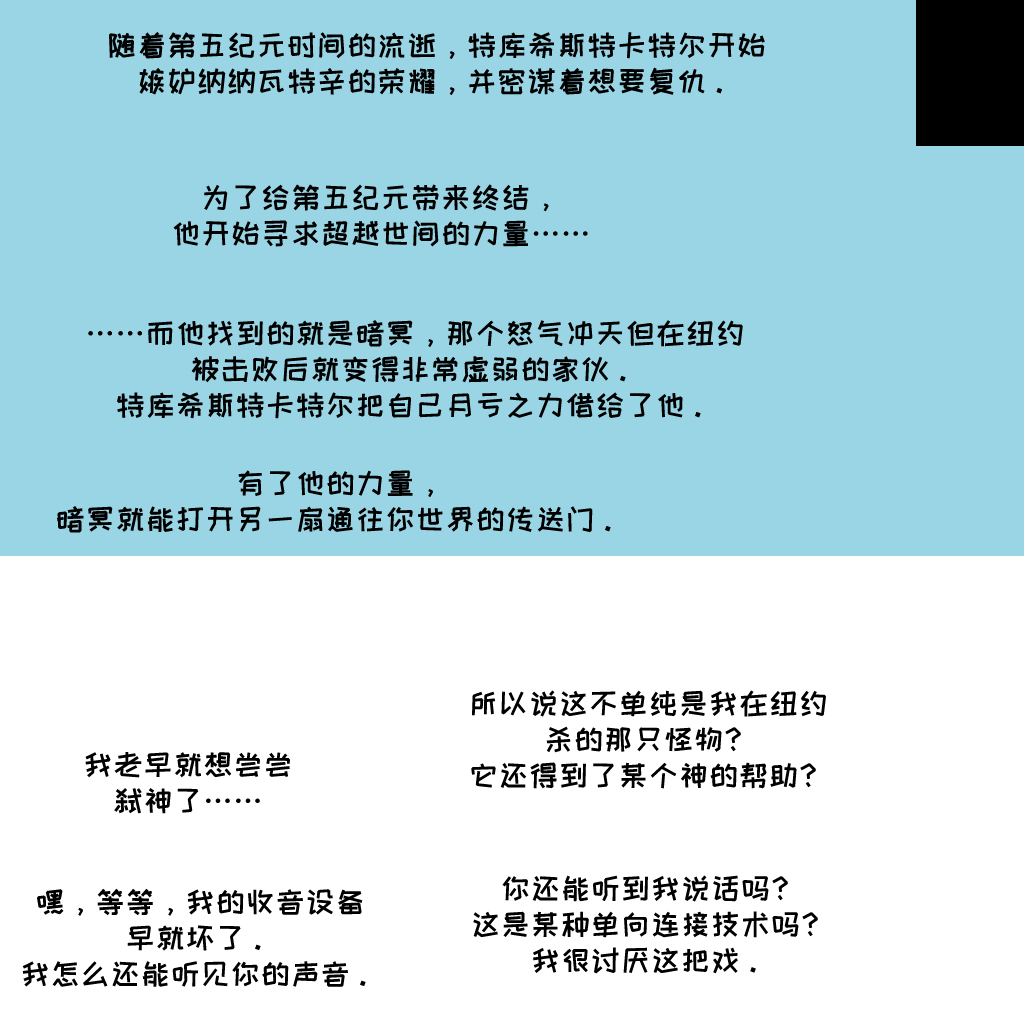
<style>
.page{position:relative;width:1024px;height:1024px;background:#99d5e4}
.page>*{position:absolute;margin:0}
.t1{font:30px/36px "HappyZcool-2016";color:#000000}
</style>
<div class="page">
<p class="t1" style="left:109px;top:32px;width:656px;height:63px;text-align:center">随着第五纪元时间的流逝，特库希斯特卡特尔开始<br>嫉妒纳纳瓦特辛的荣耀，并密谋着想要复仇。</p>
<p class="t1" style="left:173px;top:184px;width:415px;height:63px;text-align:center">为了给第五纪元带来终结，<br>他开始寻求超越世间的力量……</p>
<p class="t1" style="left:88px;top:320px;width:655px;height:99px;text-align:center">……而他找到的就是暗冥，那个怒气冲天但在纽约<br>被击败后就变得非常虚弱的家伙。<br>特库希斯特卡特尔把自己月亏之力借给了他。</p>
<p class="t1" style="left:57px;top:470px;width:554px;height:63px;text-align:center">有了他的力量，<br>暗冥就能打开另一扇通往你世界的传送门。</p>
<p class="t1" style="left:471px;top:690px;width:355px;height:99px;text-align:center">所以说这不单纯是我在纽约<br>杀的那只怪物？<br>它还得到了某个神的帮助？</p>
<p class="t1" style="left:85px;top:752px;width:205px;height:62px;text-align:center">我老早就想尝尝<br>弑神了……</p>
<p class="t1" style="left:473px;top:875px;width:345px;height:99px;text-align:center">你还能听到我说话吗？<br>这是某种单向连接技术吗？<br>我很讨厌这把戏。</p>
<p class="t1" style="left:22px;top:888px;width:344px;height:99px;text-align:center">嘿，等等，我的收音设备<br>早就坏了。<br>我怎么还能听见你的声音。</p>
</div>
